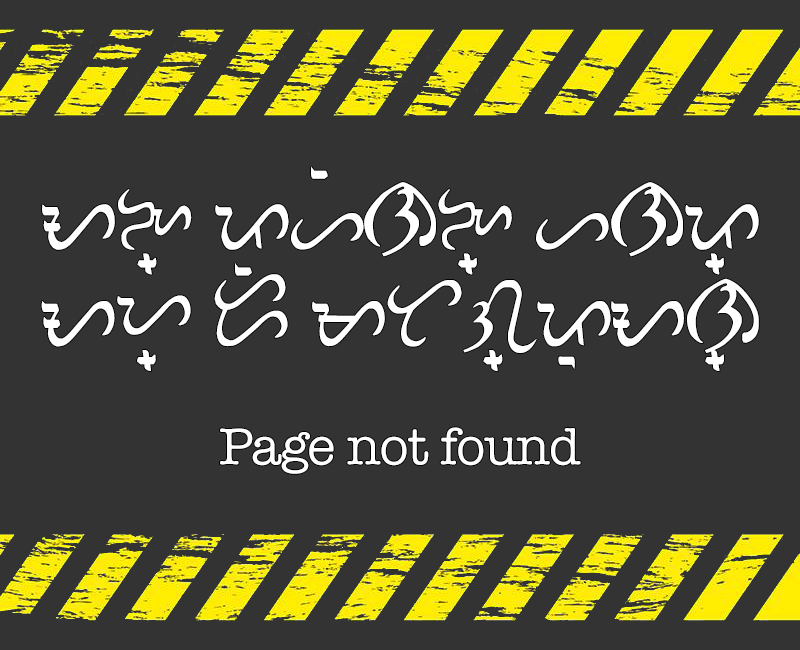
<style>
.page{position:relative;width:800px;height:650px;background:#333333}
.page>*{position:absolute;margin:0}
.t1{font:123.9px/48.3px "BaybayinModernScript";letter-spacing:-0.02em;color:#ffffff;scale:0.86 1}
.t2{font:53.3px "AmericanTypewriter";letter-spacing:-0.02em;color:#ffffff}
</style>
<div class="page">
<p class="t1" style="left:41px;top:166px;width:718px;height:205px;text-align:center">AN= phinN= hnp=<br><br>ay= di mtg=poAn=</p>
<p class="t2" style="left:220px;top:427px;width:361px;height:47px">Page not found</p>
</div>
